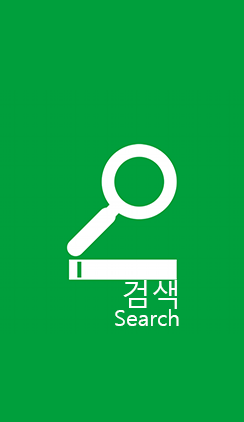
<style>
.page{position:relative;width:244px;height:422px;background:#009f3c}
.page>*{position:absolute;margin:0}
.t1{font:30px "MalgunGothicRegular";color:#ffffff}
.t2{font:22px "MalgunGothicRegular";color:#ffffff}
</style>
<div class="page">
<p class="t1" style="left:123px;top:280px;width:54px;height:29px">검색</p>
<p class="t2" style="left:115px;top:309px;width:64px;height:17px">Search</p>
</div>
